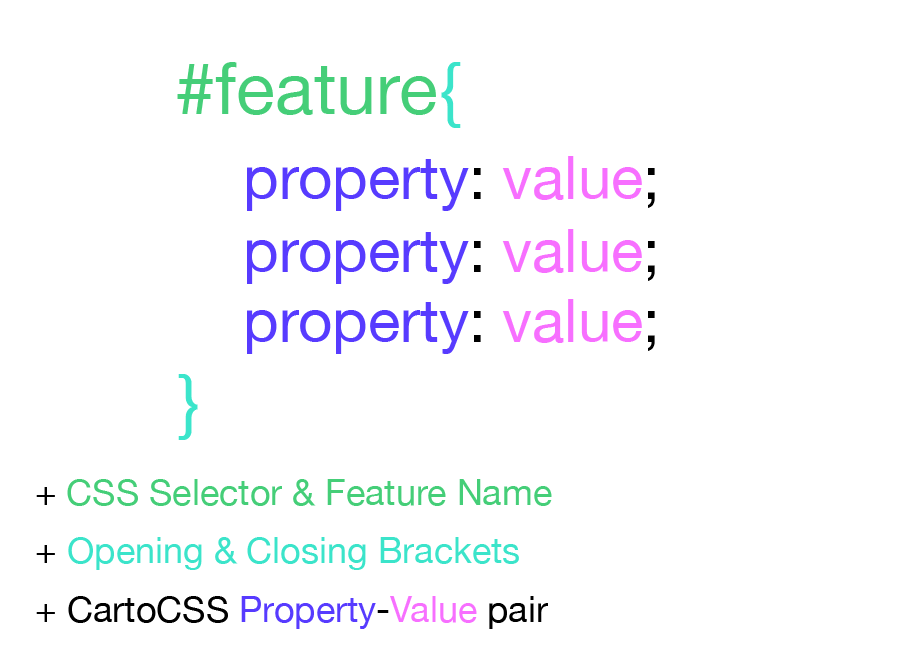
<style>
.page{position:relative;width:900px;height:658px;background:#ffffff}
.page>*{position:absolute;margin:0}
.t1{font:72px "HelveticaNeue";color:#45ce78}
.t2{font:72px "HelveticaNeue";color:#3be4ca}
.t3{font:60px "HelveticaNeue";color:#573bff}
.t4{font:60px "HelveticaNeue";color:#000000}
.t5{font:60px "HelveticaNeue";color:#f76fff}
.t6{font:72px "HelveticaNeue";color:#3be5cb}
.t7{font:36px "HelveticaNeue";color:#45ce78}
.t8{font:36px "HelveticaNeue";color:#000000}
.t9{font:36px "HelveticaNeue";color:#3be4ca}
.t10{font:36px "HelveticaNeue";color:#573bff}
.t11{font:36px "HelveticaNeue";color:#f76fff}
</style>
<div class="page">
<p class="t1" style="left:177px;top:62px;width:284px;height:66px">#feature<span class="t2">{</span></p>
<p class="t3" style="left:247px;top:156px;width:408px;height:55px">property<span class="t4">: </span><span class="t5">value</span><span class="t4">;</span></p>
<p class="t3" style="left:247px;top:229px;width:408px;height:55px">property<span class="t4">: </span><span class="t5">value</span><span class="t4">;</span></p>
<p class="t3" style="left:247px;top:299px;width:408px;height:55px">property<span class="t4">: </span><span class="t5">value</span><span class="t4">;</span></p>
<p class="t6" style="left:178px;top:374px;width:20px;height:66px">}</p>
<p class="t7" style="left:36px;top:479px;width:516px;height:27px"><span class="t8">+ </span>CSS Selector &amp; Feature Name</p>
<p class="t9" style="left:36px;top:537px;width:483px;height:33px"><span class="t8">+</span> Opening &amp; Closing Brackets</p>
<p class="t8" style="left:36px;top:596px;width:512px;height:33px">+ CartoCSS <span class="t10">Property</span>-<span class="t11">Value </span>pair</p>
</div>
